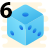
<style>
.page{position:relative;width:50px;height:50px;background:#ffffff}
.page>*{position:absolute;margin:0}
.t1{font:24px "MyriadHebrew-Bold";color:#000000}
</style>
<div class="page">
<p class="t1" style="left:0px;top:2px;width:12px;height:16px">6</p>
</div>
